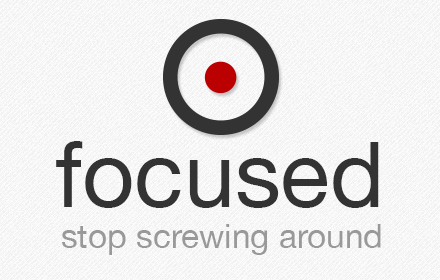
<style>
.page{position:relative;width:440px;height:280px}
.page>*{position:absolute;margin:0}
.t1{font:91.7px "HelveticaNeue";color:#333333}
.t2{font:33.3px "HelveticaNeue";color:#999999}
</style>
<div class="page">
<p class="t1" style="left:56px;top:141px;width:323px;height:67px">focused</p>
<p class="t2" style="left:62px;top:224px;width:319px;height:31px">stop screwing around</p>
</div>
